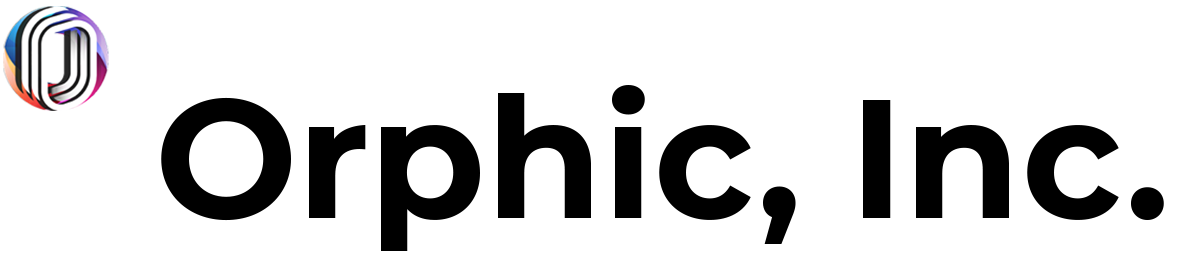
<style>
.page{position:relative;width:1179px;height:267px;background:#ffffff}
.page>*{position:absolute;margin:0}
.t1{font:168.9px "Montserrat-Bold";color:#000000}
</style>
<div class="page">
<p class="t1" style="left:161px;top:85px;width:1003px;height:166px">Orphic, Inc.</p>
</div>
